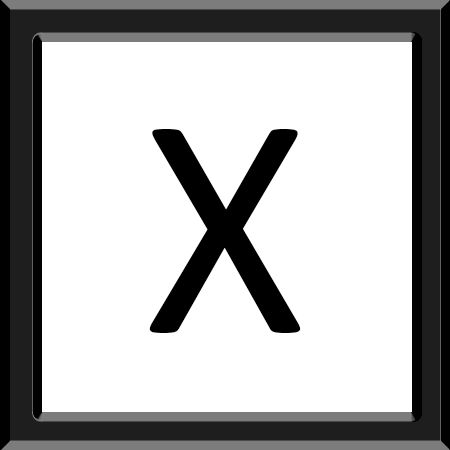
<style>
.page{position:relative;width:450px;height:450px;background:#ffffff}
.page>*{position:absolute;margin:0}
.t1{font:320px "Calibri";color:#000000}
</style>
<div class="page">
<p class="t1" style="left:149px;top:129px;width:152px;height:204px">X</p>
</div>
